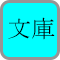
<style>
.page{position:relative;width:60px;height:60px;background:#00ffff}
.page>*{position:absolute;margin:0}
.t1{font:24px "MS-Mincho";color:#000000}
</style>
<div class="page">
<p class="t1" style="left:8px;top:17px;width:47px;height:23px">文庫</p>
</div>
